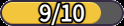
<style>
.page{position:relative;width:124px;height:26px;background:#f3c53d}
.page>*{position:absolute;margin:0}
.t1{font:22px "WebPSD-18463539-0-Regular";color:#ffffff;font-weight:bold}
</style>
<div class="page">
<p class="t1" style="left:0px;top:0px;width:124px;height:26px">9/10</p>
</div>
